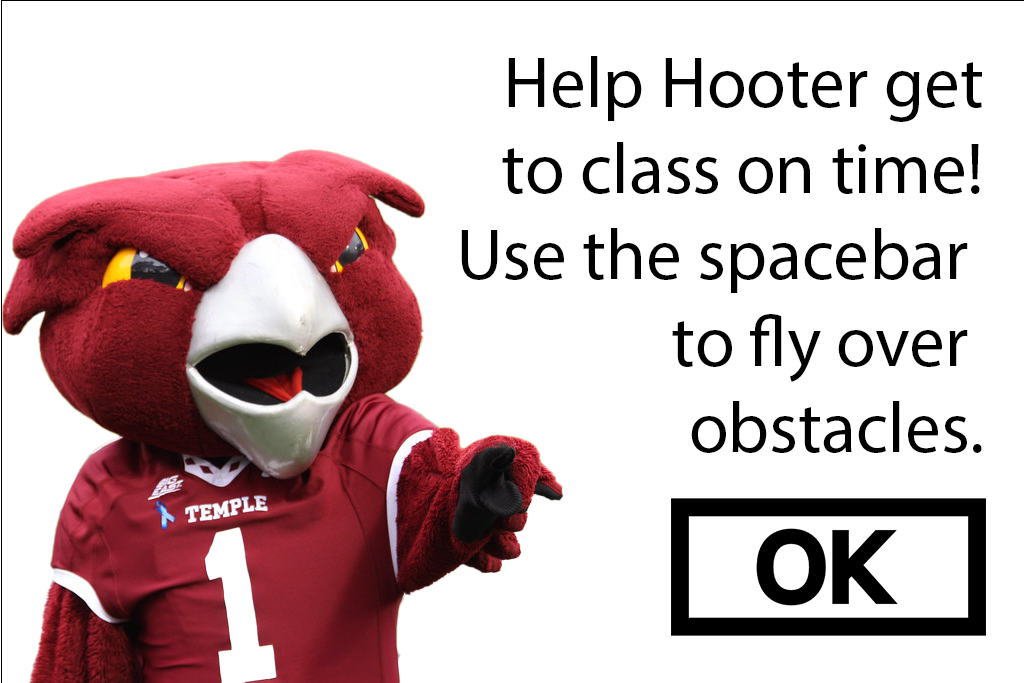
<style>
.page{position:relative;width:1024px;height:683px;background:#ffffff}
.page>*{position:absolute;margin:0}
.t1{font:72px "MyriadPro-Regular";color:#000000}
</style>
<div class="page">
<p class="t1" style="left:461px;top:56px;width:521px;height:397px;text-align:right">Help Hooter get<br>to class on time!<br>Use the spacebar <br>to fly over <br>obstacles.</p>
</div>
